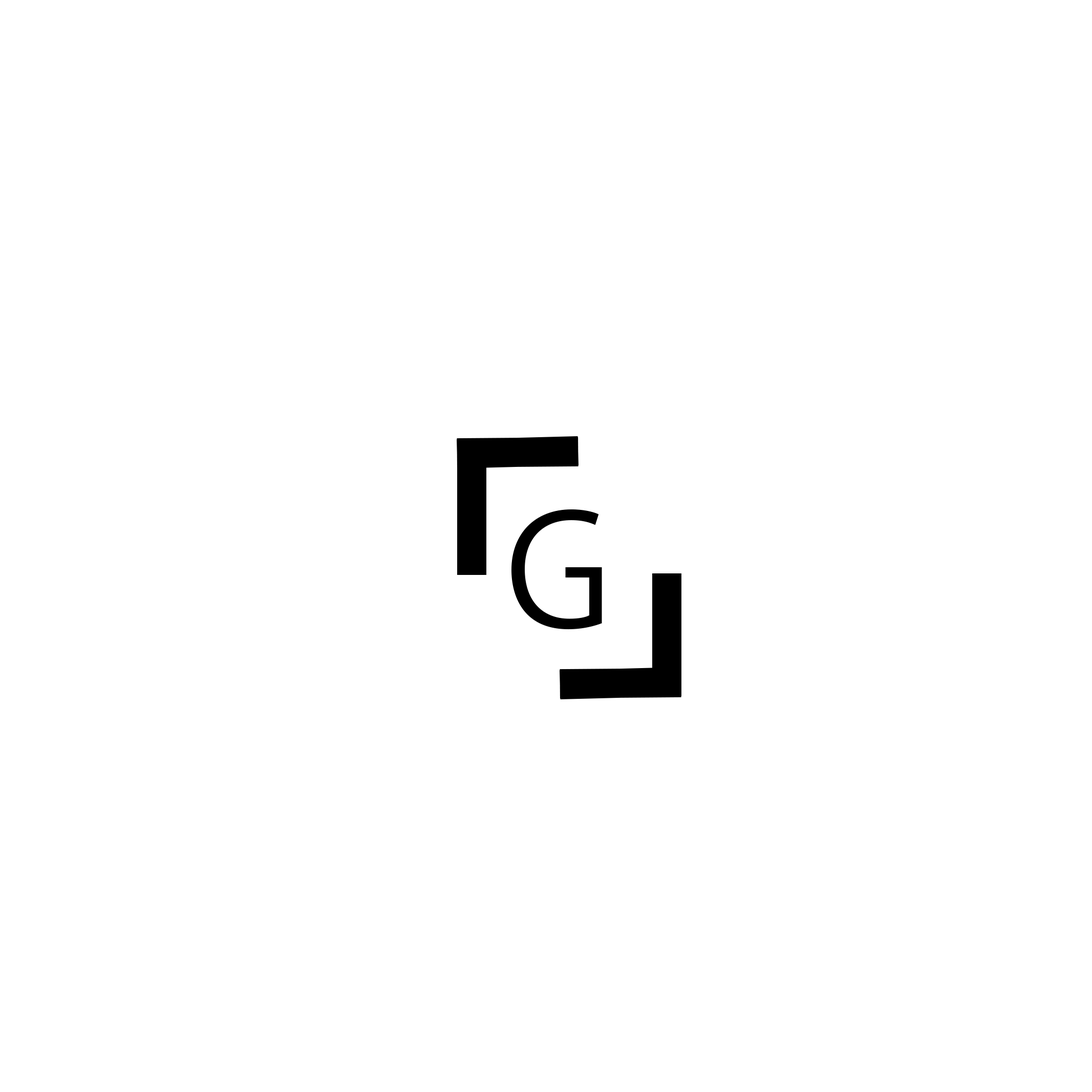
<style>
.page{position:relative;width:1092px;height:1092px;background:#ffffff}
.page>*{position:absolute;margin:0}
.t1{font:153.6px "KozGoPr6N-Regular";color:#000000}
</style>
<div class="page">
<p class="t1" style="left:511px;top:509px;width:91px;height:121px">G</p>
</div>
